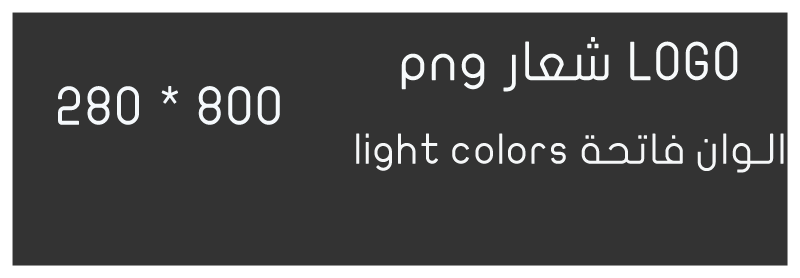
<style>
.page{position:relative;width:800px;height:278px;background:#333333}
.page>*{position:absolute;margin:0}
.t1{font:53.5px/178.2px "JFFlat-Regular";letter-spacing:0.016em;color:#f7fafb}
.t2{font:53.5px "JFFlat-Regular";letter-spacing:0.016em;color:#f5f9fc}
.t3{font:41.7px/178.2px "JFFlat-Regular";letter-spacing:0.016em;color:#f5f7f8}
</style>
<div class="page">
<p class="t1" style="left:401px;top:37px;width:337px;height:55px;text-align:justify">LOGO شعار png<br>الوان فاتحة</p>
<p class="t2" style="left:58px;top:86px;width:222px;height:39px">800 * 280</p>
<p class="t3" style="left:356px;top:133px;width:428px;height:40px;text-align:justify">الوان فاتحة light colors<br>الوان فاتحة</p>
</div>
